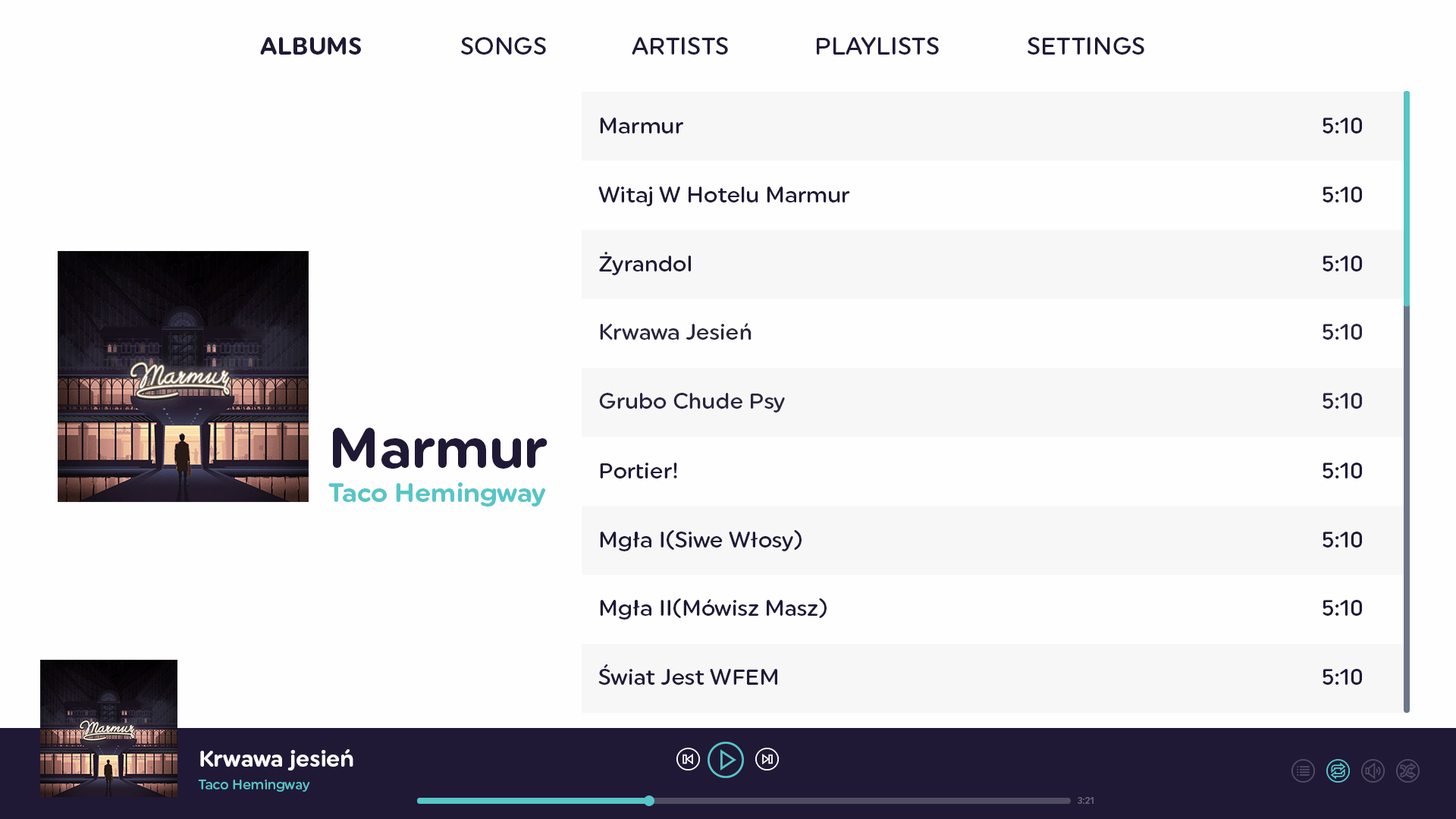
<style>
.page{position:relative;width:1456px;height:819px;background:#fefefe}
.page>*{position:absolute;margin:0}
.t1{font:24.4px "UniformRnd-Bold";color:#1f1936}
.t2{font:24.4px "UniformRnd-Medium";color:#1f1936}
.t3{font:37.9px "UniformRnd-Medium";color:#1f1936}
.t4{font:56.9px "UniformRnd-Bold";color:#1f1936}
.t5{font:26.5px "UniformRnd-Bold";color:#58c5c6}
.t6{font:22.7px "UniformRnd-Bold";color:#fefefe}
.t7{font:13.6px "UniformRnd-Medium";color:#58c5c6}
.t8{font:16.1px "UniformRnd-Medium";color:#696774}
</style>
<div class="page">
<p class="t1" style="left:260px;top:37px;width:101px;height:18px">ALBUMS</p>
<p class="t2" style="left:461px;top:37px;width:85px;height:18px">SONGS</p>
<p class="t2" style="left:632px;top:37px;width:96px;height:18px">ARTISTS</p>
<p class="t2" style="left:817px;top:37px;width:122px;height:18px">PLAYLISTS</p>
<p class="t2" style="left:1028px;top:37px;width:116px;height:18px">SETTINGS</p>
<p class="t3" style="left:600px;top:118px;width:84px;height:15px">Marmur</p>
<p class="t3" style="left:1323px;top:118px;width:39px;height:15px">5:10</p>
<p class="t3" style="left:598px;top:187px;width:252px;height:19px">Witaj W Hotelu Marmur</p>
<p class="t3" style="left:1323px;top:187px;width:39px;height:15px">5:10</p>
<p class="t3" style="left:599px;top:252px;width:92px;height:23px">Żyrandol</p>
<p class="t3" style="left:1323px;top:256px;width:39px;height:15px">5:10</p>
<p class="t3" style="left:600px;top:323px;width:151px;height:17px">Krwawa Jesień</p>
<p class="t3" style="left:1323px;top:324px;width:39px;height:16px">5:10</p>
<p class="t3" style="left:599px;top:393px;width:186px;height:20px">Grubo Chude Psy</p>
<p class="t3" style="left:1323px;top:393px;width:39px;height:16px">5:10</p>
<p class="t4" style="left:333px;top:428px;width:215px;height:41px">Marmur</p>
<p class="t3" style="left:600px;top:463px;width:77px;height:16px">Portier!</p>
<p class="t3" style="left:1323px;top:463px;width:39px;height:16px">5:10</p>
<p class="t5" style="left:328px;top:482px;width:217px;height:25px">Taco Hemingway</p>
<p class="t3" style="left:600px;top:530px;width:202px;height:21px">Mgła I(Siwe Włosy)</p>
<p class="t3" style="left:1323px;top:532px;width:39px;height:16px">5:10</p>
<p class="t3" style="left:600px;top:598px;width:227px;height:22px">Mgła II(Mówisz Masz)</p>
<p class="t3" style="left:1323px;top:600px;width:39px;height:16px">5:10</p>
<p class="t3" style="left:598px;top:664px;width:179px;height:21px">Świat Jest WFEM</p>
<p class="t3" style="left:1323px;top:669px;width:39px;height:16px">5:10</p>
<p class="t6" style="left:200px;top:749px;width:153px;height:21px">Krwawa jesień</p>
<p class="t7" style="left:198px;top:780px;width:112px;height:12px">Taco Hemingway</p>
<p class="t8" style="left:1078px;top:797px;width:16px;height:7px">3:21</p>
</div>
